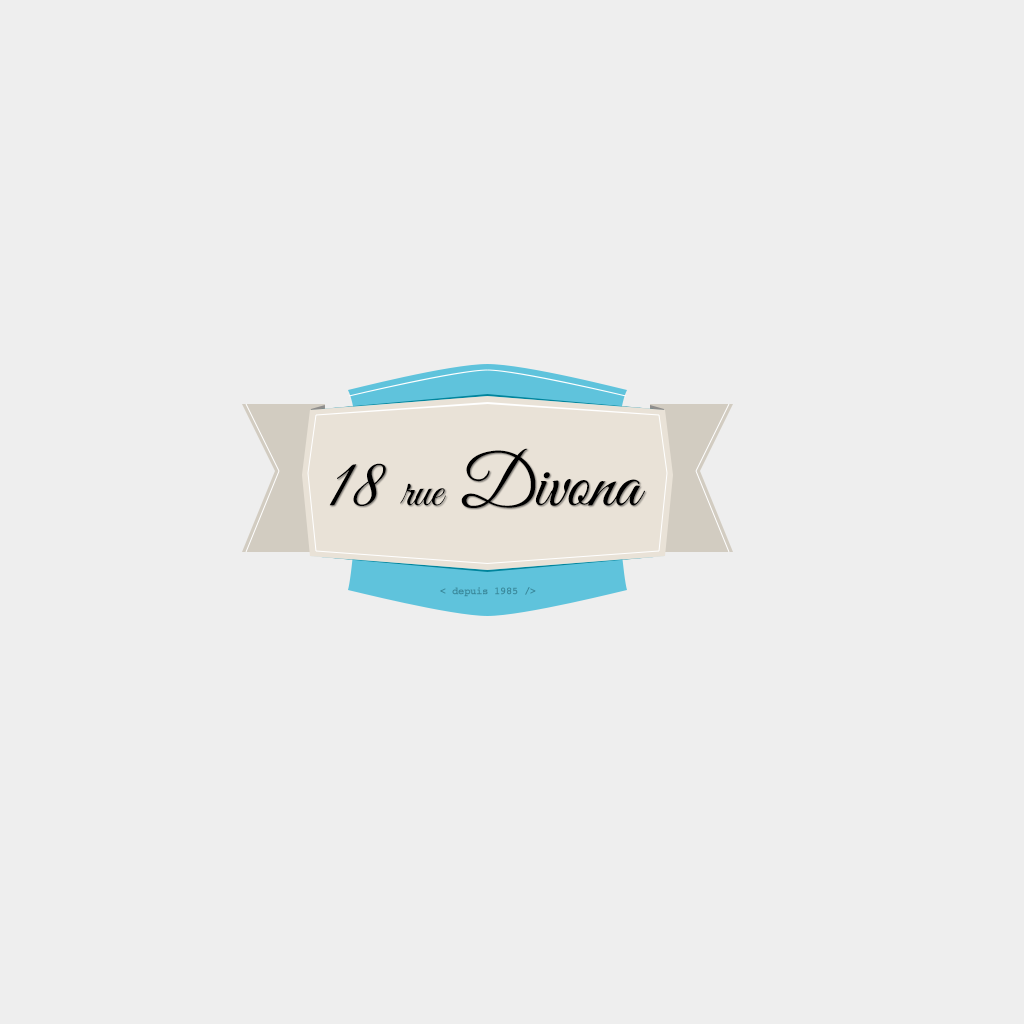
<style>
.page{position:relative;width:1024px;height:1024px;background:#eeeeee}
.page>*{position:absolute;margin:0}
.t1{font:72px "GreatVibes-Regular";color:#000000}
.t2{font:48px "GreatVibes-Regular";color:#000000}
.t3{font:10px "Courier";color:#3a899c;font-weight:bold}
</style>
<div class="page">
<p class="t1" style="left:329px;top:448px;width:316px;height:60px">18 <span class="t2">rue</span> Divona</p>
<p class="t3" style="left:440px;top:587px;width:96px;height:10px">&lt; depuis 1985 /&gt;</p>
</div>
